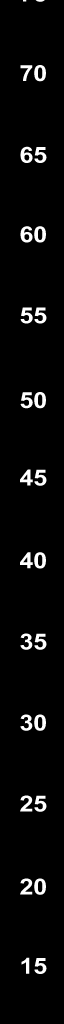
<style>
.page{position:relative;width:64px;height:1024px;background:#000000}
.page>*{position:absolute;margin:0}
.t1{font:22.2px "Arial-BoldMT";color:#ffffff;scale:1.12 1}
</style>
<div class="page">
<p class="t1" style="left:20px;top:65px;width:26px;height:17px">70</p>
<p class="t1" style="left:20px;top:146px;width:27px;height:17px">65</p>
<p class="t1" style="left:20px;top:226px;width:26px;height:17px">60</p>
<p class="t1" style="left:20px;top:307px;width:27px;height:17px">55</p>
<p class="t1" style="left:20px;top:392px;width:26px;height:17px">50</p>
<p class="t1" style="left:20px;top:469px;width:27px;height:17px">45</p>
<p class="t1" style="left:20px;top:552px;width:26px;height:17px">40</p>
<p class="t1" style="left:20px;top:633px;width:27px;height:17px">35</p>
<p class="t1" style="left:20px;top:714px;width:26px;height:17px">30</p>
<p class="t1" style="left:20px;top:795px;width:27px;height:17px">25</p>
<p class="t1" style="left:20px;top:878px;width:26px;height:17px">20</p>
<p class="t1" style="left:21px;top:957px;width:26px;height:17px">15</p>
</div>
